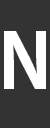
<style>
.page{position:relative;width:50px;height:128px;background:#333333}
.page>*{position:absolute;margin:0}
.t1{font:75px "AdobeGothicStd-Bold";color:#ffffff}
</style>
<div class="page">
<p class="t1" style="left:4px;top:31px;width:42px;height:58px">N</p>
</div>
